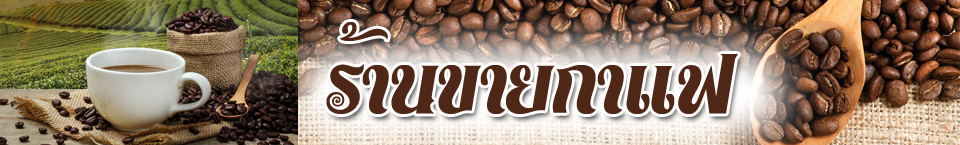
<style>
.page{position:relative;width:960px;height:145px}
.page>*{position:absolute;margin:0}
.t1{font:118.2px "PSLButterfly";color:#4f2717}
</style>
<div class="page">
<p class="t1" style="left:326px;top:22px;width:412px;height:92px">ร้านขายกาแฟ</p>
</div>
